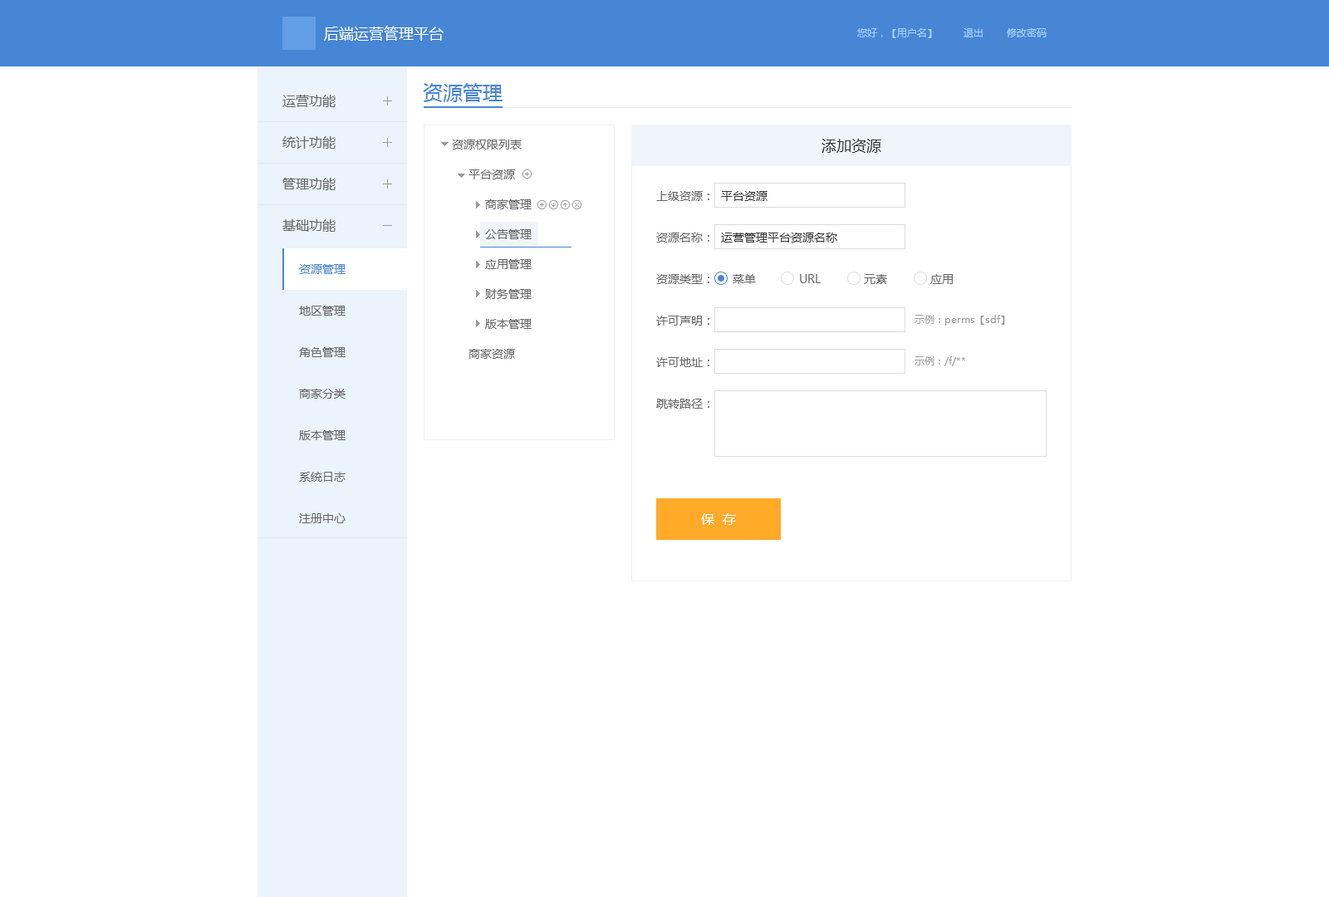
<style>
.page{position:relative;width:1329px;height:897px;background:#ffffff}
.page>*{position:absolute;margin:0}
.t1{font:15px "MicrosoftYaHei";color:#ffffff}
.t2{font:10px "MicrosoftYaHei";color:#acd1ff}
.t3{font:19.9px "MicrosoftYaHei";color:#4686d5}
.t4{font:13.3px/41.5px "MicrosoftYaHei";color:#666666}
.t5{font:11.6px/29.9px "MicrosoftYaHei";color:#666666}
.t6{font:15px "MicrosoftYaHei";color:#333333}
.t7{font:11.6px/41.5px "MicrosoftYaHei";color:#666666}
.t8{font:11.6px/41.5px "MicrosoftYaHei";color:#333333}
.t9{font:11.6px/41.5px "MicrosoftYaHei";color:#4686d5}
.t10{font:11.6px "MicrosoftYaHei";color:#666666}
.t11{font:10px/41.5px "MicrosoftYaHei";color:#999999}
.t12{font:13.3px "MicrosoftYaHei";color:#ffffff}
</style>
<div class="page">
<p class="t1" style="left:324px;top:26px;width:120px;height:15px">后端运营管理平台</p>
<p class="t2" style="left:857px;top:28px;width:190px;height:10px">您好，【用户名】        退出       修改密码</p>
<p class="t3" style="left:423px;top:83px;width:80px;height:19px">资源管理</p>
<p class="t4" style="left:282px;top:95px;width:54px;height:137px">运营功能<br>统计功能<br>管理功能<br>基础功能</p>
<p class="t5" style="left:452px;top:140px;width:80px;height:219px">资源权限列表<br>     平台资源<br>          商家管理<br>          公告管理<br>          应用管理<br>          财务管理<br>          版本管理<br>     商家资源</p>
<p class="t6" style="left:822px;top:139px;width:59px;height:14px">添加资源</p>
<p class="t7" style="left:656px;top:191px;width:181px;height:218px">上级资源： <span class="t8"> 平台资源<br></span>资源名称：  <span class="t8">运营管理平台资源名称<br></span>资源类型：    <br>许可声明： <br>许可地址： <br>跳转路径：</p>
<p class="t7" style="left:299px;top:264px;width:47px;height:259px"><span class="t9">资源管理<br></span>地区管理<br>角色管理<br>商家分类<br>版本管理<br>系统日志<br>注册中心</p>
<p class="t10" style="left:733px;top:274px;width:220px;height:10px">菜单             URL             元素             应用</p>
<p class="t11" style="left:915px;top:315px;width:90px;height:51px">示例：perms【sdf】<br>示例：/f/**</p>
<p class="t12" style="left:701px;top:513px;width:35px;height:12px">保  存</p>
</div>
